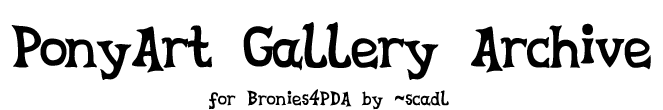
<style>
.page{position:relative;width:663px;height:110px;background:#ffffff}
.page>*{position:absolute;margin:0}
.t1{font:64px "CelestiaReduxMedium";letter-spacing:-0.02em;color:#000000}
</style>
<div class="page">
<p class="t1" style="left:11px;top:22px;width:640px;height:58px">PonyArt Gallery Archive</p>
</div>
